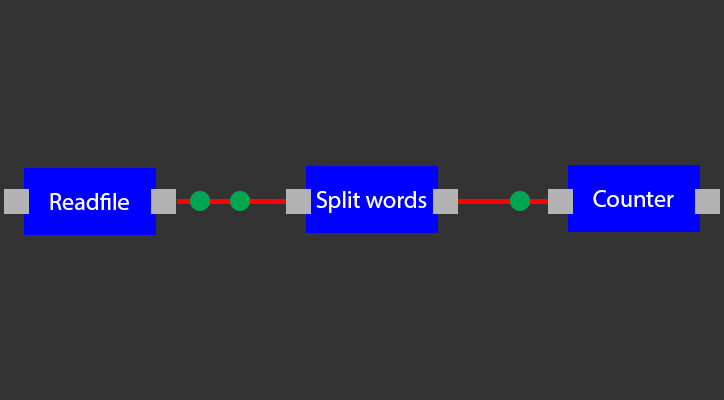
<style>
.page{position:relative;width:724px;height:400px;background:#333333}
.page>*{position:absolute;margin:0}
.t1{font:24px "MyriadPro-Regular";color:#ffffff}
</style>
<div class="page">
<p class="t1" style="left:50px;top:193px;width:79px;height:17px">Readfile</p>
<p class="t1" style="left:316px;top:191px;width:111px;height:22px">Split words</p>
<p class="t1" style="left:593px;top:190px;width:81px;height:17px">Counter</p>
</div>
